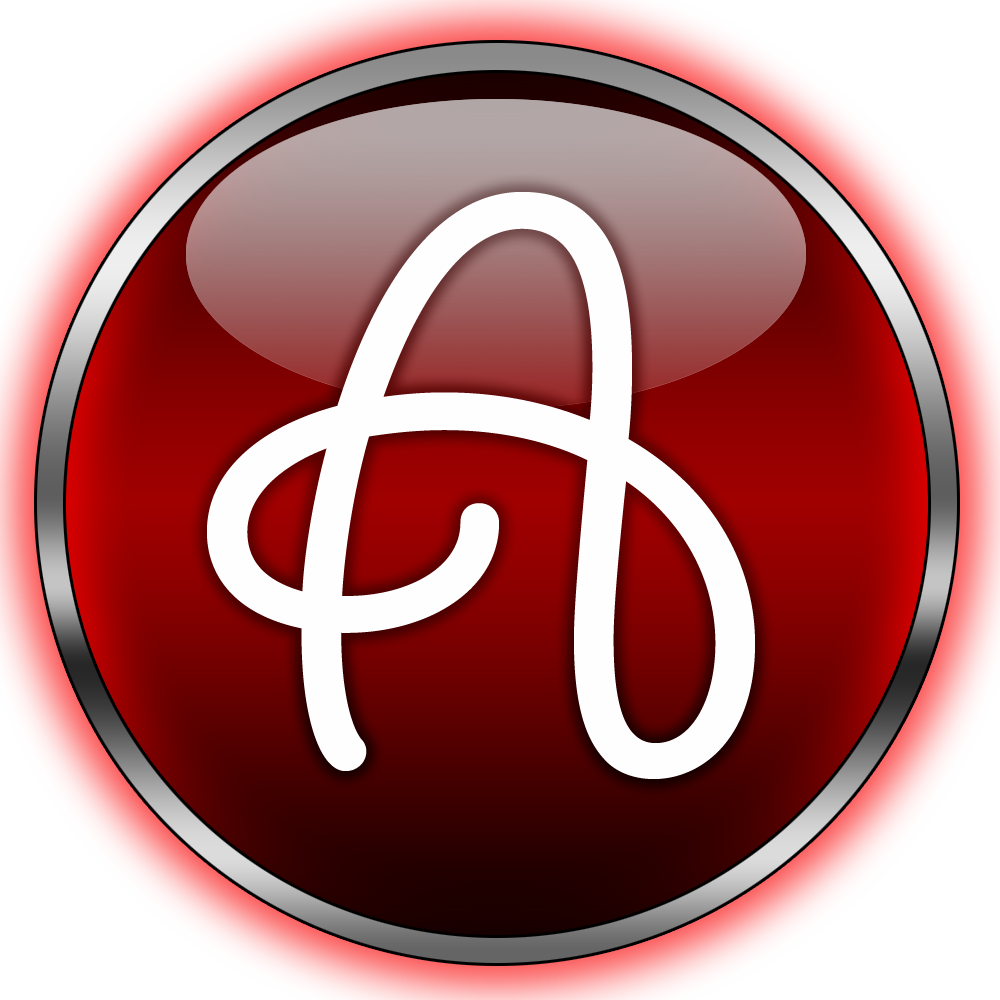
<style>
.page{position:relative;width:1000px;height:1000px}
.page>*{position:absolute;margin:0}
.t1{font:895.3px "GiddyupStd";color:#fffefe}
</style>
<div class="page">
<p class="t1" style="left:207px;top:192px;width:548px;height:587px">A</p>
</div>
